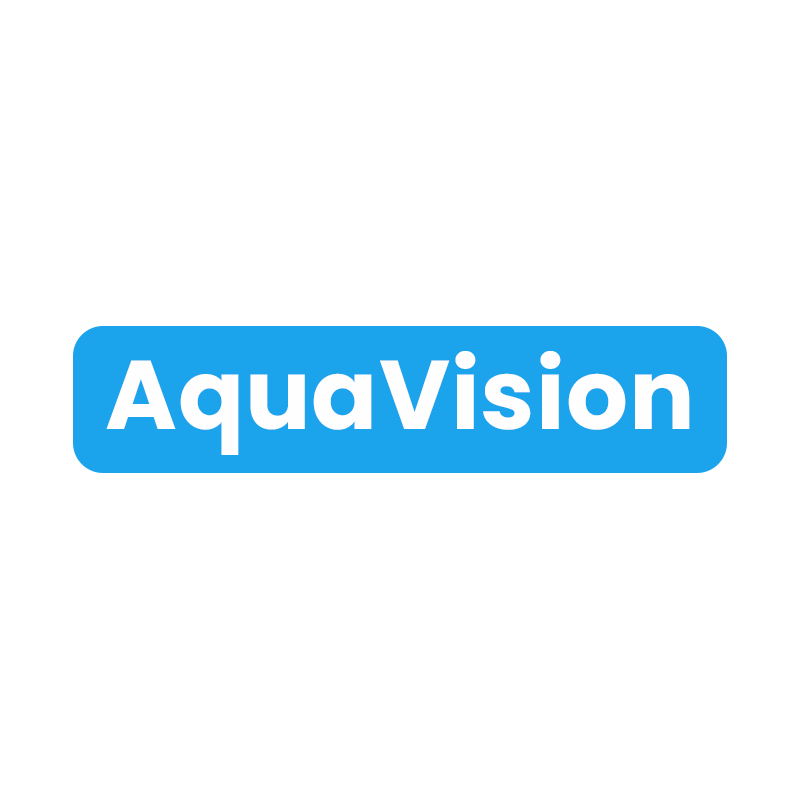
<style>
.page{position:relative;width:800px;height:800px;background:#ffffff}
.page>*{position:absolute;margin:0}
.t1{font:97.5px "Poppins-Bold";letter-spacing:0.01em;color:#fefefe}
</style>
<div class="page">
<p class="t1" style="left:106px;top:351px;width:584px;height:104px">AquaVision</p>
</div>
